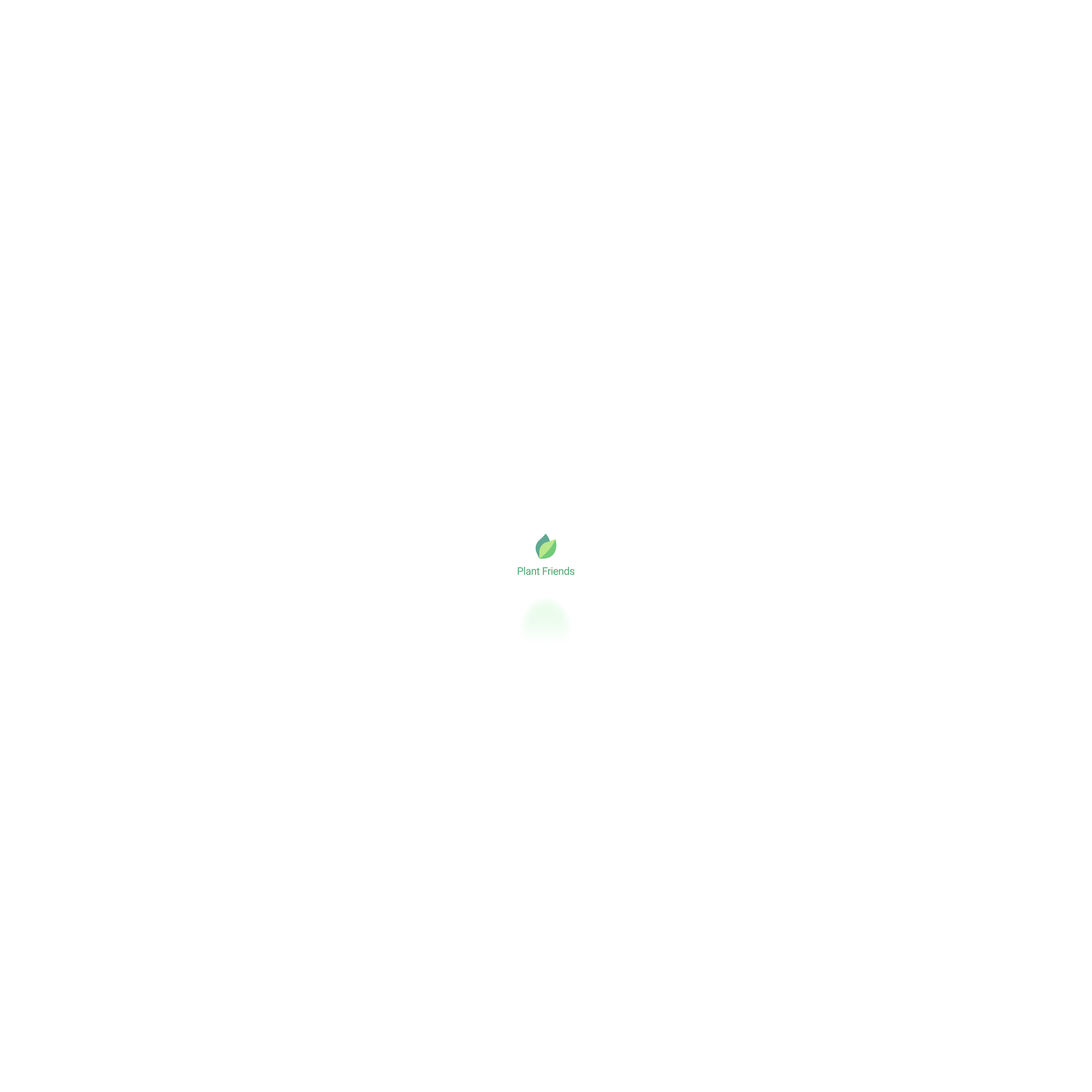
<style>
.page{position:relative;width:1092px;height:1092px;background:#ffffff}
.page>*{position:absolute;margin:0}
.t1{font:10.5px "Roboto-Regular";letter-spacing:-0.025em;color:#58ae78}
</style>
<div class="page">
<p class="t1" style="left:518px;top:567px;width:57px;height:8px">Plant Friends</p>
</div>
